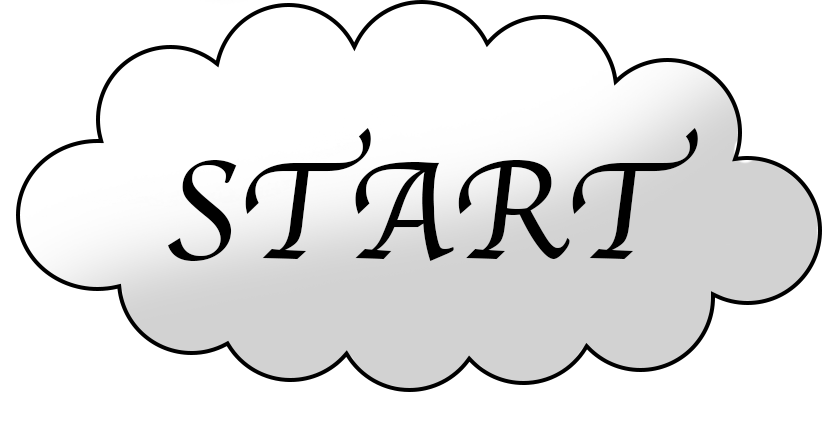
<style>
.page{position:relative;width:835px;height:429px;background:#ffffff}
.page>*{position:absolute;margin:0}
.t1{font:144px "Apple-Chancery";color:#000000}
</style>
<div class="page">
<p class="t1" style="left:168px;top:128px;width:530px;height:133px">START</p>
</div>
